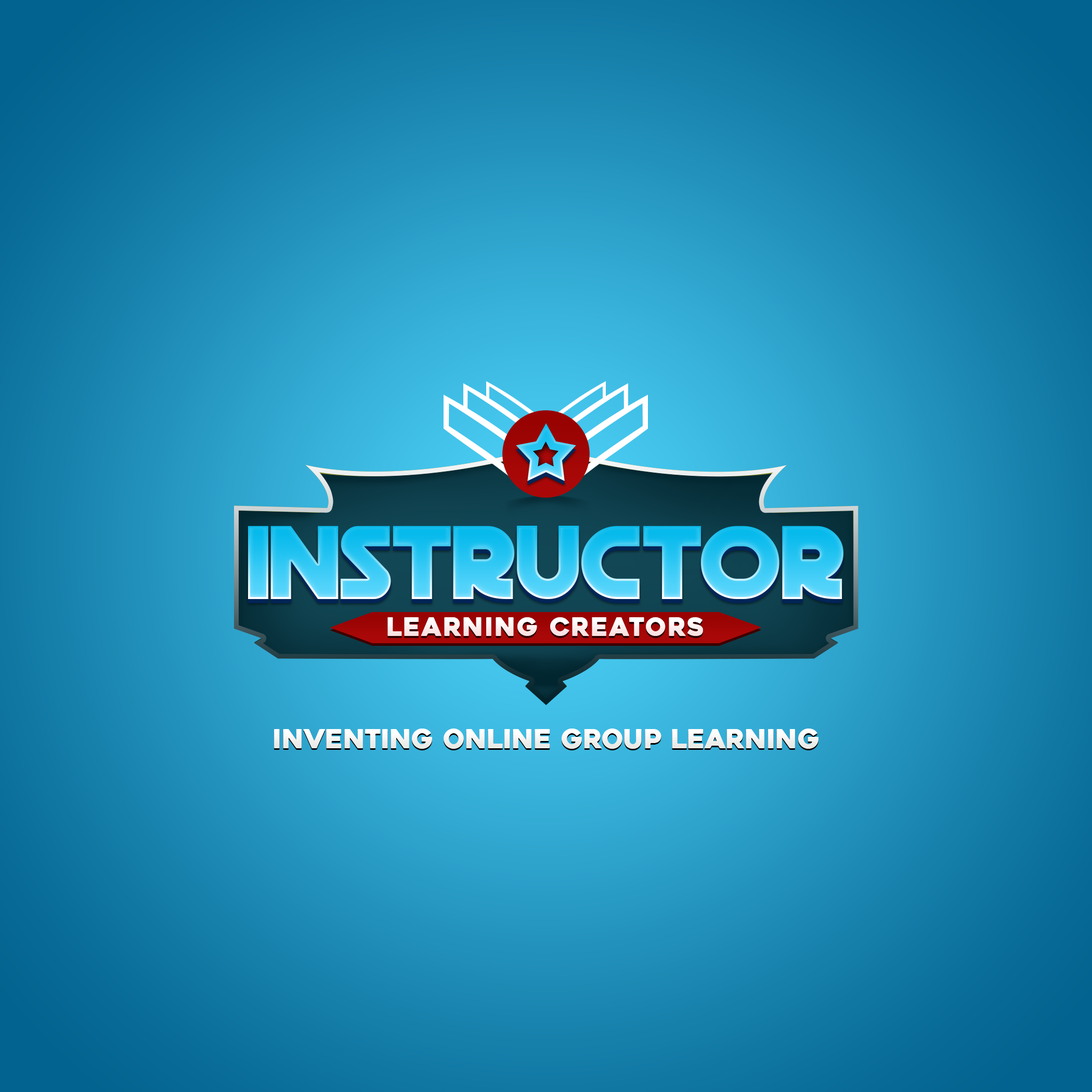
<style>
.page{position:relative;width:1092px;height:1092px}
.page>*{position:absolute;margin:0}
.t1{font:25.5px "Heavitas";letter-spacing:0.05em;color:#fdf1f1}
.t2{font:26.6px "Heavitas";color:#f4f4f3}
</style>
<div class="page">
<p class="t1" style="left:387px;top:617px;width:316px;height:19px">learning Creators</p>
<p class="t2" style="left:274px;top:729px;width:544px;height:20px">Inventing online group learning</p>
</div>
